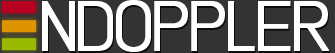
<style>
.page{position:relative;width:335px;height:53px;background:#333333}
.page>*{position:absolute;margin:0}
.t1{font:120px "Lintel";letter-spacing:-0.05em;color:#ffffff;font-variant:small-caps;font-weight:bold}
.t2{font:120px "Lintel";color:#ffffff;font-variant:small-caps}
</style>
<div class="page">
<p class="t1" style="left:42px;top:0px;width:287px;height:52px"><span class="t2">  </span>NDOPPLER</p>
</div>
